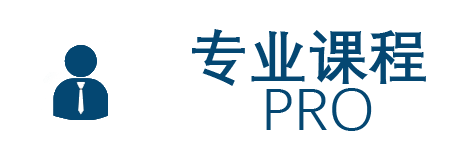
<style>
.page{position:relative;width:450px;height:150px;background:#ffffff}
.page>*{position:absolute;margin:0}
.t1{font:60px "DengXian-Bold";color:#044772}
.t2{font:60px "DengXian-Regular";color:#044772}
</style>
<div class="page">
<p class="t1" style="left:192px;top:29px;width:234px;height:57px">专业课程</p>
<p class="t2" style="left:266px;top:88px;width:106px;height:43px">PRO</p>
</div>
